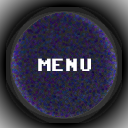
<style>
.page{position:relative;width:128px;height:128px}
.page>*{position:absolute;margin:0}
.t1{font:18px "Commodore-64-Pixelized";color:#ffffff}
</style>
<div class="page">
<p class="t1" style="left:38px;top:58px;width:53px;height:13px">MENU</p>
</div>
